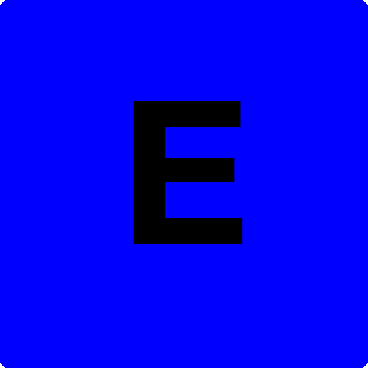
<style>
.page{position:relative;width:368px;height:368px;background:#0000ff}
.page>*{position:absolute;margin:0}
.t1{font:200px "HelveticaNeue-Bold";color:#000000}
</style>
<div class="page">
<p class="t1" style="left:133px;top:101px;width:110px;height:143px">E</p>
</div>
